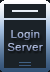
<style>
.page{position:relative;width:50px;height:72px;background:#1b2228}
.page>*{position:absolute;margin:0}
.t1{font:11px "ArialMT";letter-spacing:0.05em}
</style>
<div class="page">
<p class="t1" style="left:11px;top:30px;width:29px;height:10px">Login</p>
<p class="t1" style="left:7px;top:43px;width:36px;height:8px">Server</p>
</div>
